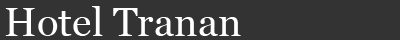
<style>
.page{position:relative;width:400px;height:40px;background:#333333}
.page>*{position:absolute;margin:0}
.t1{font:40px "Georgia";color:#ffffff}
</style>
<div class="page">
<p class="t1" style="left:5px;top:6px;width:236px;height:30px">Hotel Tranan</p>
</div>
